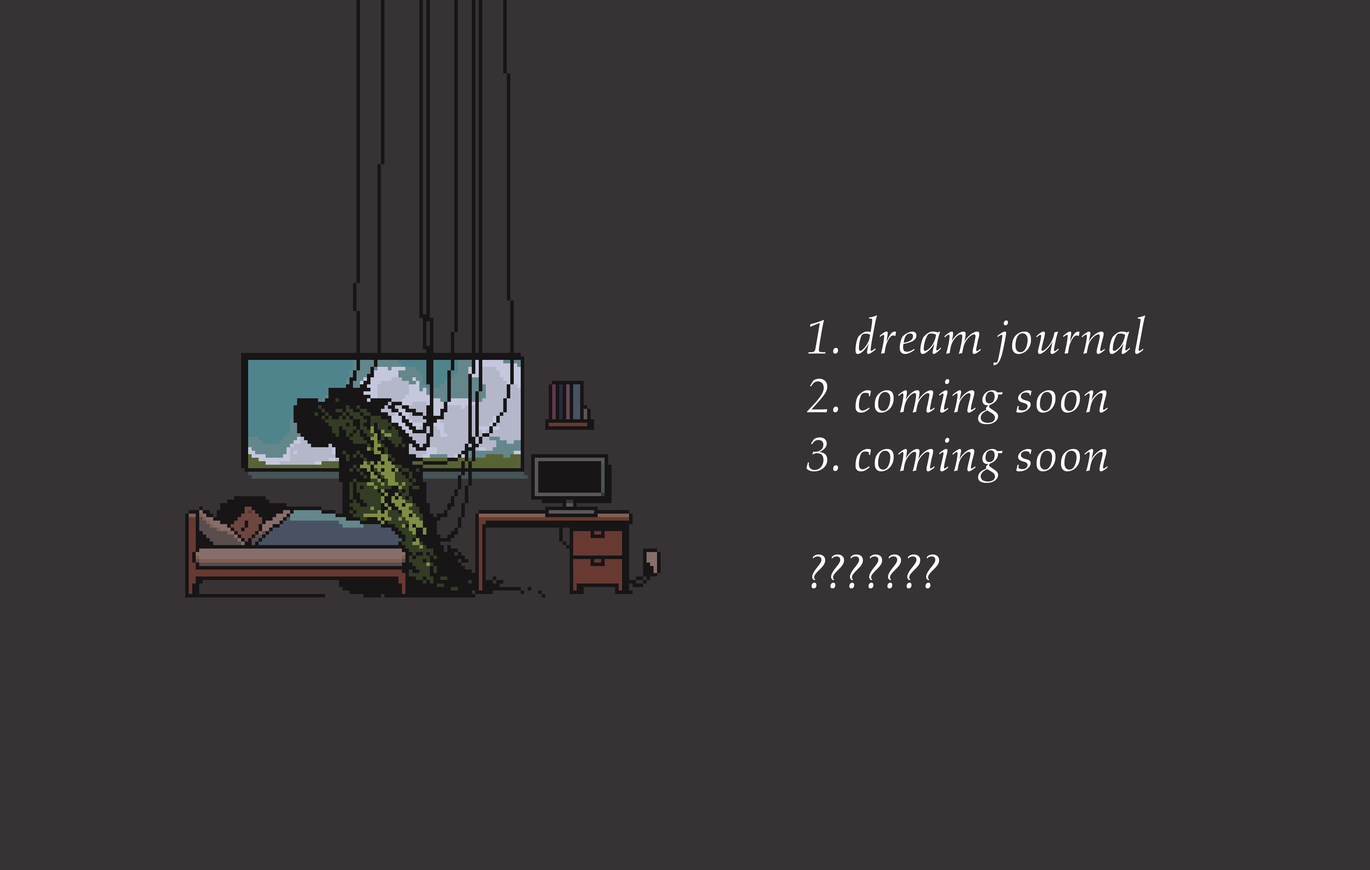
<style>
.page{position:relative;width:1370px;height:870px;background:#373334}
.page>*{position:absolute;margin:0}
.t1{font:48.9px "AldusLTStd-Italic";color:#ffffff}
</style>
<div class="page">
<p class="t1" style="left:806px;top:316px;width:339px;height:273px">1. dream journal<br>2. coming soon<br>3. coming soon<br><br>???????</p>
</div>
